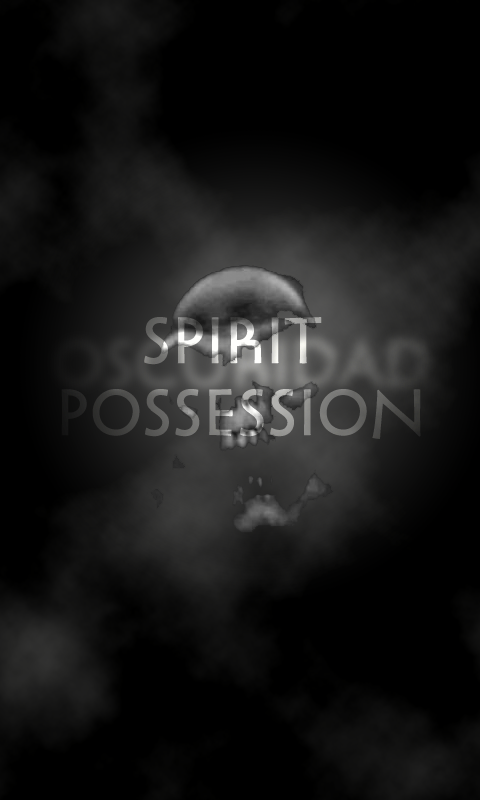
<style>
.page{position:relative;width:480px;height:800px;background:#000000}
.page>*{position:absolute;margin:0}
.t1{font:60px "Pericles"}
</style>
<div class="page">
<p class="t1" style="left:61px;top:317px;width:360px;height:122px;text-align:center">SPIRIT <br>POSSESSION</p>
</div>
